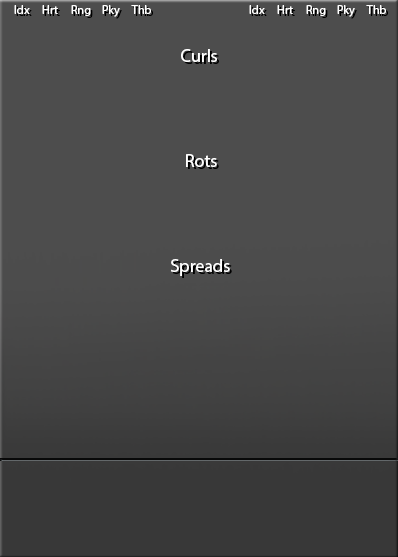
<style>
.page{position:relative;width:398px;height:557px;background:#4d4d4d}
.page>*{position:absolute;margin:0}
.t1{font:12px "MyriadPro-Regular";color:#ffffff}
.t2{font:12px "MyriadPro-Regular";color:#000000}
.t3{font:18px "MyriadPro-Regular";color:#ffffff}
.t4{font:18px "MyriadPro-Regular";color:#000000}
</style>
<div class="page">
<p class="t1" style="left:14px;top:5px;width:16px;height:9px">Idx</p>
<p class="t1" style="left:42px;top:5px;width:16px;height:9px">Hrt</p>
<p class="t1" style="left:71px;top:5px;width:20px;height:11px">Rng</p>
<p class="t1" style="left:102px;top:5px;width:18px;height:12px">Pky</p>
<p class="t1" style="left:131px;top:5px;width:20px;height:9px">Thb</p>
<p class="t1" style="left:249px;top:5px;width:16px;height:9px">Idx</p>
<p class="t1" style="left:277px;top:5px;width:16px;height:9px">Hrt</p>
<p class="t1" style="left:306px;top:5px;width:20px;height:11px">Rng</p>
<p class="t1" style="left:337px;top:5px;width:18px;height:12px">Pky</p>
<p class="t1" style="left:366px;top:5px;width:20px;height:9px">Thb</p>
<p class="t2" style="left:44px;top:7px;width:16px;height:9px">Hrt</p>
<p class="t2" style="left:133px;top:7px;width:20px;height:9px">Thb</p>
<p class="t2" style="left:279px;top:7px;width:16px;height:9px">Hrt</p>
<p class="t2" style="left:368px;top:7px;width:20px;height:9px">Thb</p>
<p class="t3" style="left:181px;top:49px;width:36px;height:13px">Curls</p>
<p class="t4" style="left:183px;top:51px;width:36px;height:13px">Curls</p>
<p class="t3" style="left:186px;top:154px;width:31px;height:13px">Rots</p>
<p class="t4" style="left:188px;top:156px;width:31px;height:13px">Rots</p>
<p class="t3" style="left:171px;top:259px;width:59px;height:17px">Spreads</p>
</div>
